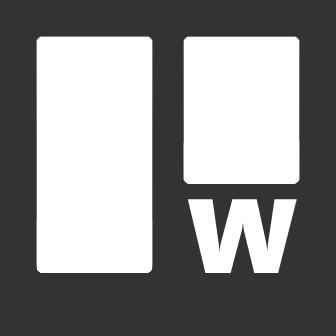
<style>
.page{position:relative;width:336px;height:336px;background:#333333}
.page>*{position:absolute;margin:0}
.t1{font:105px "SegoeWP-Black";color:#ffffff}
</style>
<div class="page">
<p class="t1" style="left:188px;top:199px;width:109px;height:74px">W</p>
</div>
